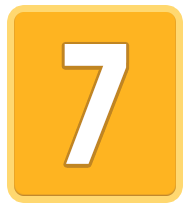
<style>
.page{position:relative;width:190px;height:208px;background:#feb421}
.page>*{position:absolute;margin:0}
.t1{font:153.8px "UniversalKnowledge";letter-spacing:0.02em;color:#ffffff}
</style>
<div class="page">
<p class="t1" style="left:64px;top:44px;width:63px;height:120px">7</p>
</div>
